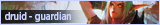
<style>
.page{position:relative;width:160px;height:25px}
.page>*{position:absolute;margin:0}
.t1{font:11.2px "MuseoSansCond-500";color:#c9d2ff}
</style>
<div class="page">
<p class="t1" style="left:5px;top:12px;width:66px;height:10px">druid - guardian</p>
</div>
